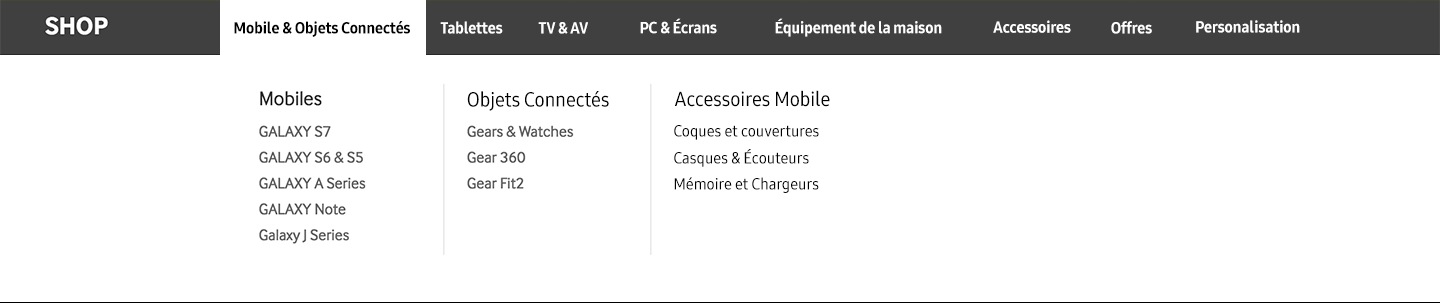
<style>
.page{position:relative;width:1440px;height:303px;background:#ffffff}
.page>*{position:absolute;margin:0}
.t1{font:16px "SamsungOne-800C";color:#010101}
.t2{font:16px "SamsungOne-800C";color:#ffffff}
.t3{font:20px "SamsungOne-500C";color:#000000}
.t4{font:16px "SamsungOne-500C";color:#010101}
</style>
<div class="page">
<p class="t1" style="left:234px;top:21px;width:176px;height:16px">Mobile &amp; Objets Connectés</p>
<p class="t1" style="left:234px;top:21px;width:176px;height:16px">Mobile &amp; Objets Connectés</p>
<p class="t2" style="left:440px;top:21px;width:63px;height:13px">Tablettes</p>
<p class="t2" style="left:538px;top:22px;width:50px;height:12px">TV &amp; AV</p>
<p class="t2" style="left:640px;top:18px;width:77px;height:16px">PC &amp; Écrans</p>
<p class="t2" style="left:775px;top:18px;width:167px;height:19px">Équipement de la maison</p>
<p class="t2" style="left:993px;top:20px;width:78px;height:13px">Accessoires</p>
<p class="t2" style="left:1111px;top:21px;width:41px;height:13px">Offres</p>
<p class="t2" style="left:1196px;top:20px;width:104px;height:13px">Personalisation</p>
<p class="t3" style="left:467px;top:91px;width:142px;height:20px">Objets Connectés</p>
<p class="t3" style="left:674px;top:90px;width:156px;height:17px">Accessoires Mobile</p>
<p class="t4" style="left:674px;top:125px;width:145px;height:15px">Coques et couvertures</p>
<p class="t4" style="left:674px;top:149px;width:135px;height:18px">Casques &amp; Écouteurs</p>
<p class="t4" style="left:674px;top:177px;width:145px;height:16px">Mémoire et Chargeurs</p>
</div>
